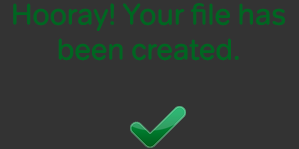
<style>
.page{position:relative;width:299px;height:149px;background:#333333}
.page>*{position:absolute;margin:0}
.t1{font:30px/35px "NOWTVText-Regular";letter-spacing:-0.025em;color:#006621}
</style>
<div class="page">
<p class="t1" style="left:13px;top:3px;width:272px;height:58px;text-align:center">Hooray! Your file has been created.</p>
</div>
